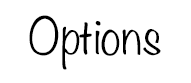
<style>
.page{position:relative;width:191px;height:83px;background:#ffffff}
.page>*{position:absolute;margin:0}
.t1{font:45px "Noteworthy-Light";color:#000000}
</style>
<div class="page">
<p class="t1" style="left:29px;top:15px;width:132px;height:55px">Options</p>
</div>
